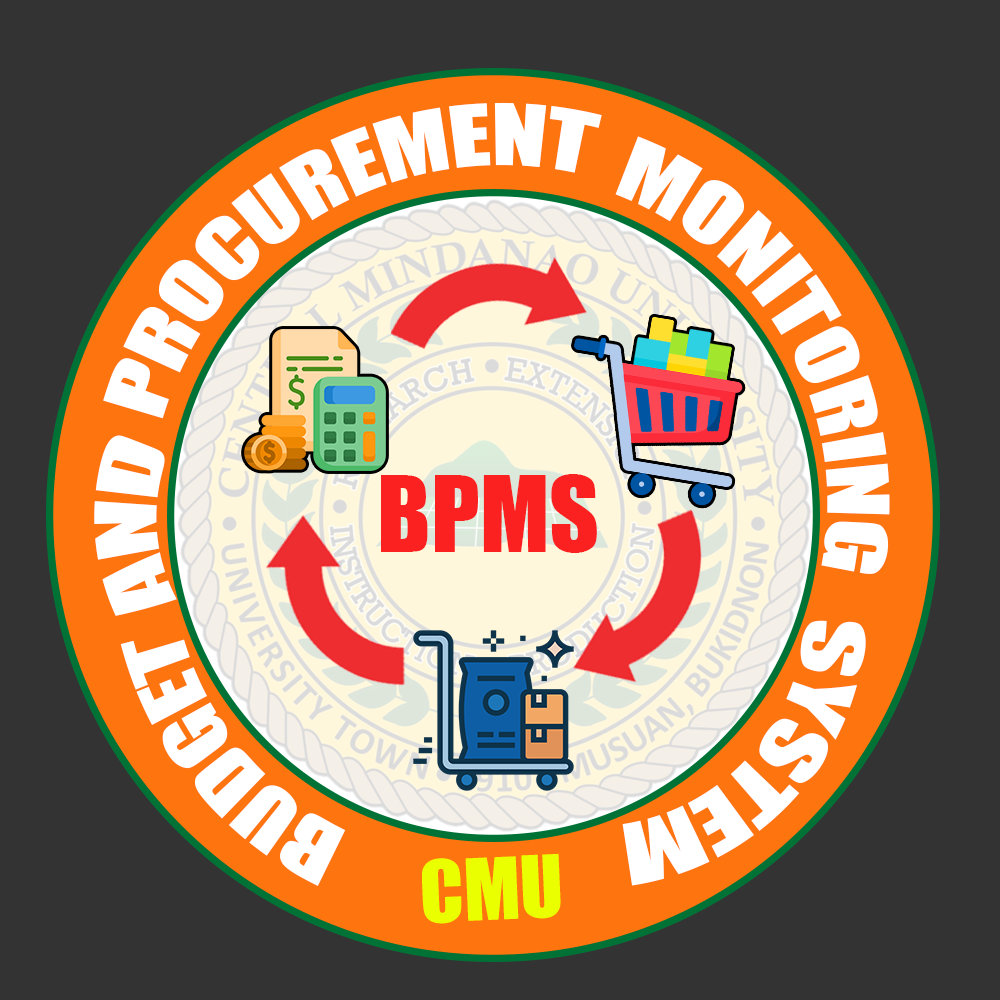
<style>
.page{position:relative;width:1000px;height:1000px;background:#333333}
.page>*{position:absolute;margin:0}
.t1{font:79px "Impact";color:#ffffff}
.t2{font:97px "Impact";color:#fb2121}
.t3{font:79px "Impact";color:#eaff00}
</style>
<div class="page">
<p class="t1" style="left:103px;top:102px;width:499px;height:317px;rotate:-30deg">PROCUREMENT</p>
<p class="t1" style="left:615px;top:136px;width:275px;height:438px;rotate:61deg">MONITORING</p>
<p class="t1" style="left:94px;top:435px;width:83px;height:181px;rotate:-92deg">AND</p>
<p class="t2" style="left:381px;top:474px;width:216px;height:79px">BPMS</p>
<p class="t1" style="left:622px;top:620px;width:244px;height:266px;rotate:132deg">SYSTEM</p>
<p class="t1" style="left:120px;top:639px;width:226px;height:247px;rotate:-129deg">BUDGET</p>
<p class="t3" style="left:422px;top:853px;width:139px;height:71px;rotate:-2deg">CMU</p>
</div>
